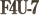
<style>
.page{position:relative;width:49px;height:16px;background:#ffffff}
.page>*{position:absolute;margin:0}
.t1{font:18px "RyuminPro-ExBold";letter-spacing:-0.08em;color:#4a3f32;font-weight:bold;scale:0.9 1}
</style>
<div class="page">
<p class="t1" style="left:0px;top:0px;width:39px;height:15px">F4U-7</p>
</div>
